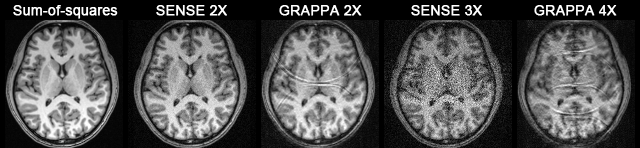
<style>
.page{position:relative;width:640px;height:148px}
.page>*{position:absolute;margin:0}
.t1{font:14px "ArialMT";color:#ffffff;font-weight:bold}
</style>
<div class="page">
<p class="t1" style="left:13px;top:5px;width:105px;height:14px">Sum-of-squares</p>
<p class="t1" style="left:156px;top:5px;width:71px;height:11px">SENSE 2X</p>
<p class="t1" style="left:279px;top:5px;width:83px;height:11px">GRAPPA 2X</p>
<p class="t1" style="left:411px;top:5px;width:71px;height:11px">SENSE 3X</p>
<p class="t1" style="left:534px;top:5px;width:83px;height:11px">GRAPPA 4X</p>
</div>
